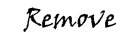
<style>
.page{position:relative;width:140px;height:40px;background:#ffffff}
.page>*{position:absolute;margin:0}
.t1{font:26.7px "VinerHandITC";color:#000000}
</style>
<div class="page">
<p class="t1" style="left:23px;top:7px;width:93px;height:25px">Remove</p>
</div>
